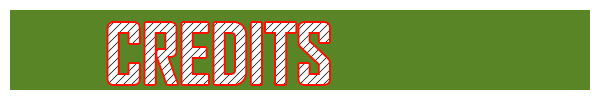
<style>
.page{position:relative;width:600px;height:100px;background:#598527}
.page>*{position:absolute;margin:0}
.t1{font:80px "AgencyFB-Bold"}
</style>
<div class="page">
<p class="t1" style="left:108px;top:23px;width:221px;height:61px">CREDITS</p>
</div>
